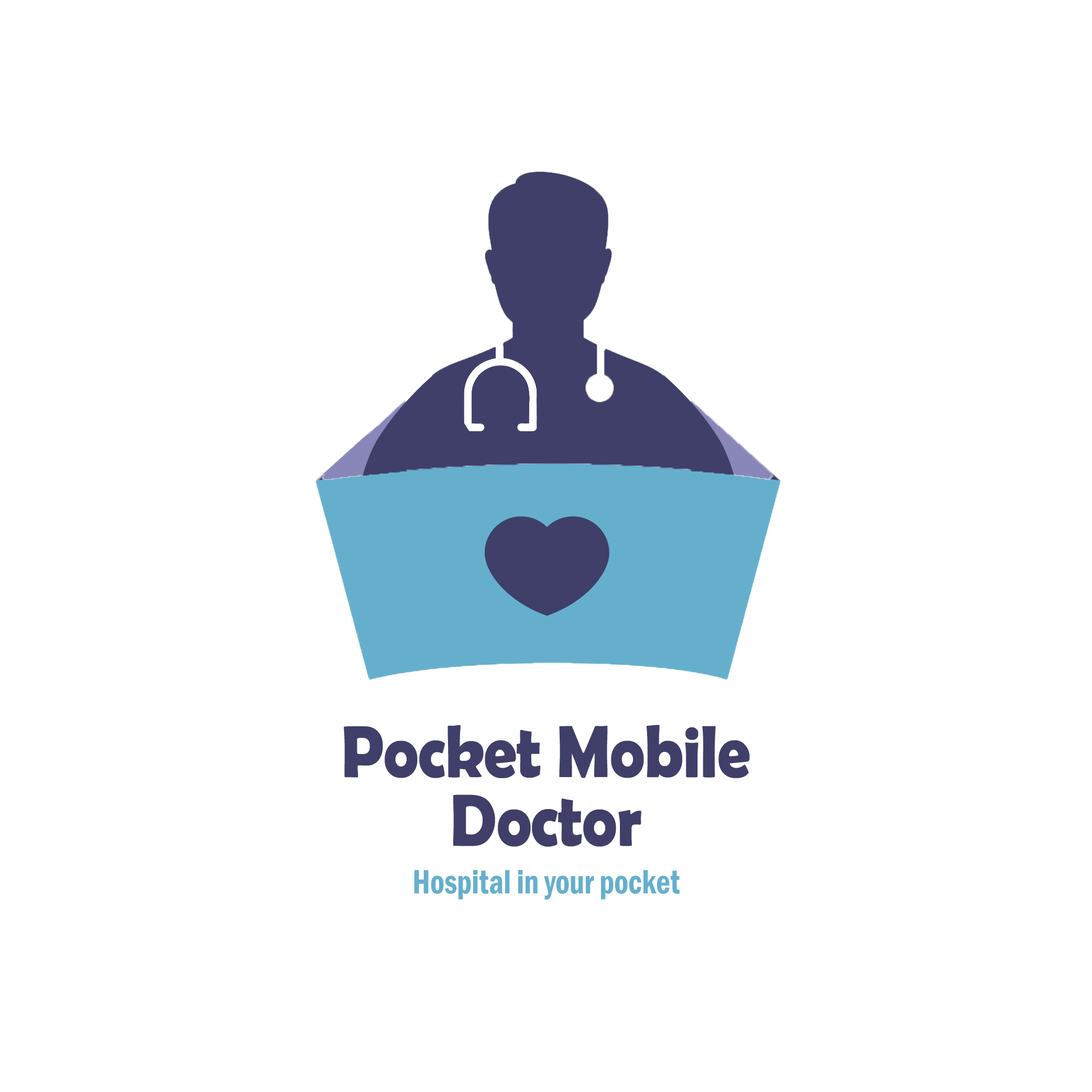
<style>
.page{position:relative;width:1092px;height:1092px;background:#ffffff}
.page>*{position:absolute;margin:0}
.t1{font:74.2px/68.6px "BerlinSansFBDemi-Bold";letter-spacing:-0.01em;color:#3f3f69;scale:0.89 1}
.t2{font:34.9px "FranklinGothic-DemiCond";color:#65afcd;scale:0.89 1}
</style>
<div class="page">
<p class="t1" style="left:344px;top:725px;width:406px;height:122px;text-align:center">Pocket Mobile<br>Doctor</p>
<p class="t2" style="left:414px;top:870px;width:266px;height:30px">Hospital in your pocket</p>
</div>
